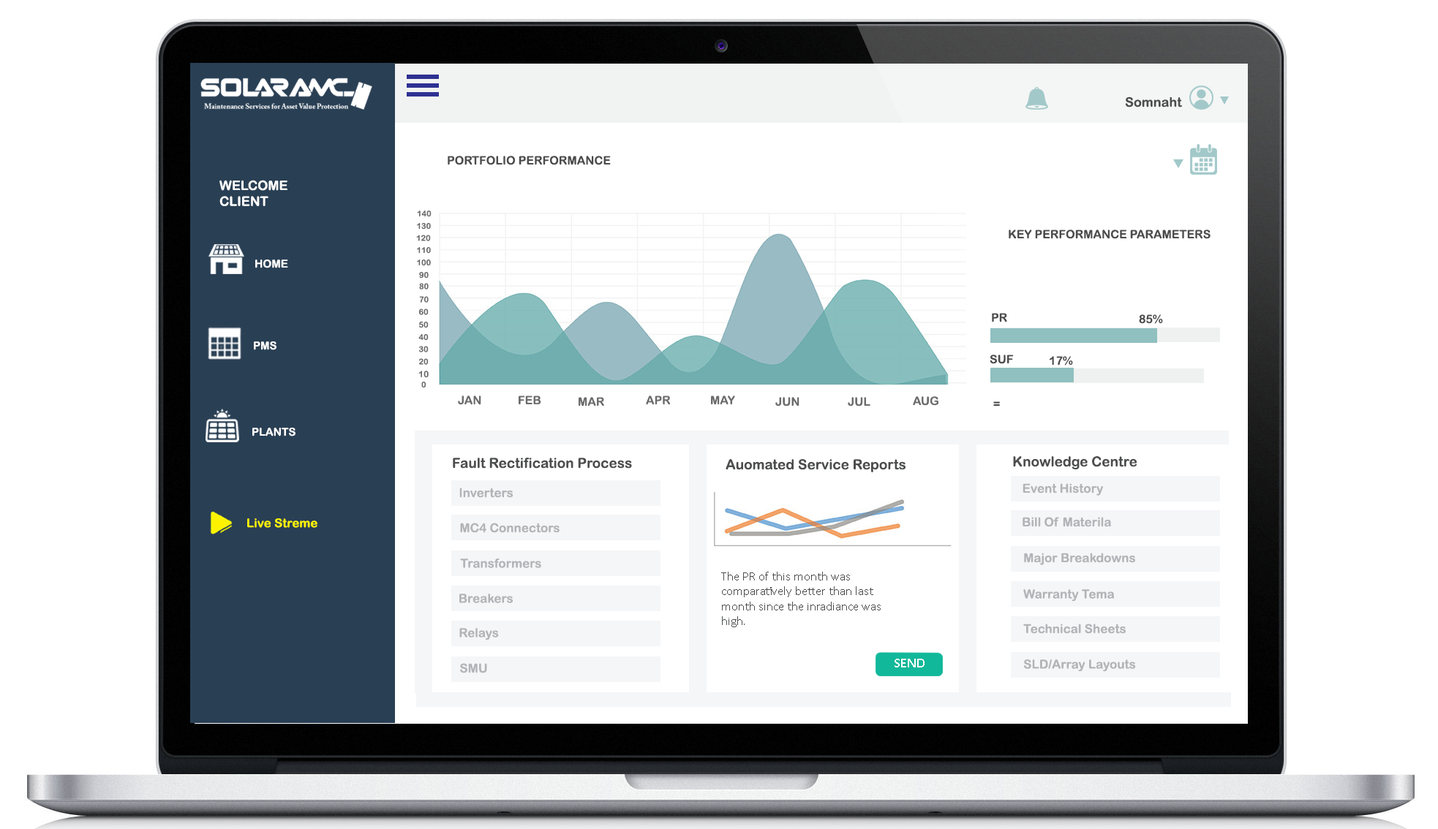
<style>
.page{position:relative;width:1438px;height:829px;background:#ffffff}
.page>*{position:absolute;margin:0}
.t1{font:13.2px "ArialRoundedMTBold";color:#4c4c4c}
.t2{font:11.7px "ArialRoundedMTBold";color:#4c4c4c}
.t3{font:13.2px "ArialRoundedMTBold";color:#fdfdfd}
.t4{font:8px "ArialRoundedMTBold";color:#6b6c6b}
.t5{font:11px "ArialRoundedMTBold";color:#fdfdfd}
.t6{font:8.8px "ArialRoundedMTBold";color:#6b6c6b}
.t7{font:11.7px "ArialRoundedMTBold";color:#6b6c6b}
.t8{font:13.9px "ArialRoundedMTBold";color:#4c4e4d}
.t9{font:12.4px "ArialRoundedMTBold";color:#b3b4b8}
.t10{font:12.1px "ArialRoundedMTBold";color:#fef301}
.t11{font:12.4px "Calibri";color:#4c4e4d}
.t12{font:13.9px "Calibri-Bold";color:#ffffff}
</style>
<div class="page">
<p class="t1" style="left:1125px;top:97px;width:57px;height:11px">Somnaht</p>
<p class="t2" style="left:448px;top:156px;width:163px;height:9px">PORTFOLIO PERFORMANCE</p>
<p class="t3" style="left:219px;top:180px;width:68px;height:26px">WELCOME<br>CLIENT</p>
<p class="t4" style="left:417px;top:211px;width:14px;height:6px">140</p>
<p class="t4" style="left:417px;top:223px;width:14px;height:7px">130</p>
<p class="t2" style="left:1009px;top:230px;width:201px;height:9px">KEY PERFORMANCE PARAMETERS</p>
<p class="t4" style="left:416px;top:235px;width:15px;height:6px">120</p>
<p class="t4" style="left:417px;top:247px;width:14px;height:7px">110</p>
<p class="t5" style="left:255px;top:260px;width:33px;height:8px">HOME</p>
<p class="t4" style="left:417px;top:260px;width:14px;height:6px">100</p>
<p class="t4" style="left:419px;top:272px;width:10px;height:7px">90</p>
<p class="t4" style="left:419px;top:283px;width:10px;height:7px">80</p>
<p class="t4" style="left:419px;top:296px;width:10px;height:7px">70</p>
<p class="t4" style="left:419px;top:309px;width:10px;height:6px">60</p>
<p class="t2" style="left:992px;top:313px;width:15px;height:10px">PR</p>
<p class="t2" style="left:1139px;top:314px;width:24px;height:10px">85%</p>
<p class="t4" style="left:419px;top:322px;width:10px;height:6px">50</p>
<p class="t5" style="left:254px;top:342px;width:22px;height:8px">PMS</p>
<p class="t4" style="left:418px;top:334px;width:11px;height:7px">40</p>
<p class="t4" style="left:419px;top:346px;width:10px;height:7px">30</p>
<p class="t4" style="left:419px;top:358px;width:10px;height:7px">20</p>
<p class="t2" style="left:990px;top:355px;width:24px;height:9px">SUF</p>
<p class="t2" style="left:1049px;top:356px;width:24px;height:10px">17%</p>
<p class="t6" style="left:418px;top:371px;width:11px;height:7px">10</p>
<p class="t4" style="left:421px;top:382px;width:5px;height:6px">0</p>
<p class="t7" style="left:458px;top:396px;width:23px;height:9px">JAN</p>
<p class="t7" style="left:519px;top:396px;width:22px;height:9px">FEB</p>
<p class="t7" style="left:578px;top:397px;width:26px;height:10px">MAR</p>
<p class="t7" style="left:646px;top:396px;width:24px;height:9px">APR</p>
<p class="t7" style="left:711px;top:396px;width:24px;height:9px">MAY</p>
<p class="t7" style="left:775px;top:397px;width:24px;height:10px">JUN</p>
<p class="t7" style="left:848px;top:397px;width:22px;height:10px">JUL</p>
<p class="t7" style="left:913px;top:396px;width:25px;height:10px">AUG</p>
<p class="t2" style="left:993px;top:402px;width:7px;height:5px">=</p>
<p class="t5" style="left:252px;top:428px;width:43px;height:9px">PLANTS</p>
<p class="t8" style="left:453px;top:458px;width:179px;height:11px">Fault Rectification Process</p>
<p class="t8" style="left:725px;top:459px;width:181px;height:13px">Auomated Service Reports</p>
<p class="t8" style="left:1013px;top:456px;width:124px;height:14px">Knowledge Centre</p>
<p class="t9" style="left:1022px;top:483px;width:81px;height:13px">Event History</p>
<p class="t9" style="left:459px;top:488px;width:54px;height:10px">Inverters</p>
<p class="t10" style="left:247px;top:519px;width:70px;height:9px">Live Streme</p>
<p class="t9" style="left:1022px;top:517px;width:89px;height:10px">Bill Of Materila</p>
<p class="t9" style="left:460px;top:523px;width:99px;height:10px">MC4 Connectors</p>
<p class="t9" style="left:1024px;top:553px;width:111px;height:12px">Major Breakdowns</p>
<p class="t9" style="left:460px;top:559px;width:81px;height:9px">Transformers</p>
<p class="t11" style="left:721px;top:572px;width:160px;height:55px">The PR of this month was<br>comparatively better than last<br>month since the inradiance was<br>high.</p>
<p class="t9" style="left:459px;top:594px;width:54px;height:9px">Breakers</p>
<p class="t9" style="left:1023px;top:589px;width:91px;height:13px">Warranty Tema</p>
<p class="t9" style="left:459px;top:628px;width:40px;height:13px">Relays</p>
<p class="t9" style="left:1023px;top:624px;width:103px;height:10px">Technical Sheets</p>
<p class="t9" style="left:460px;top:663px;width:27px;height:11px">SMU</p>
<p class="t12" style="left:894px;top:659px;width:30px;height:9px">SEND</p>
<p class="t9" style="left:1024px;top:660px;width:112px;height:12px">SLD/Array Layouts</p>
</div>
